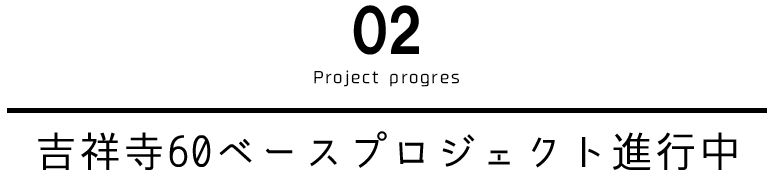
<style>
.page{position:relative;width:773px;height:176px;background:#ffffff}
.page>*{position:absolute;margin:0}
.t1{font:60px "HGPSoeiKakugothicUB";letter-spacing:-0.05em;color:#000000}
.t2{font:16px "04KanjyukuGothic";letter-spacing:0.1em;color:#000000}
.t3{font:42px "komorebi-gothic";letter-spacing:0.05em;color:#000000}
</style>
<div class="page">
<p class="t1" style="left:353px;top:5px;width:66px;height:50px">02</p>
<p class="t2" style="left:314px;top:70px;width:145px;height:17px">Project progres</p>
<p class="t3" style="left:38px;top:131px;width:699px;height:39px">吉祥寺60ベースプロジェクト進行中</p>
</div>
